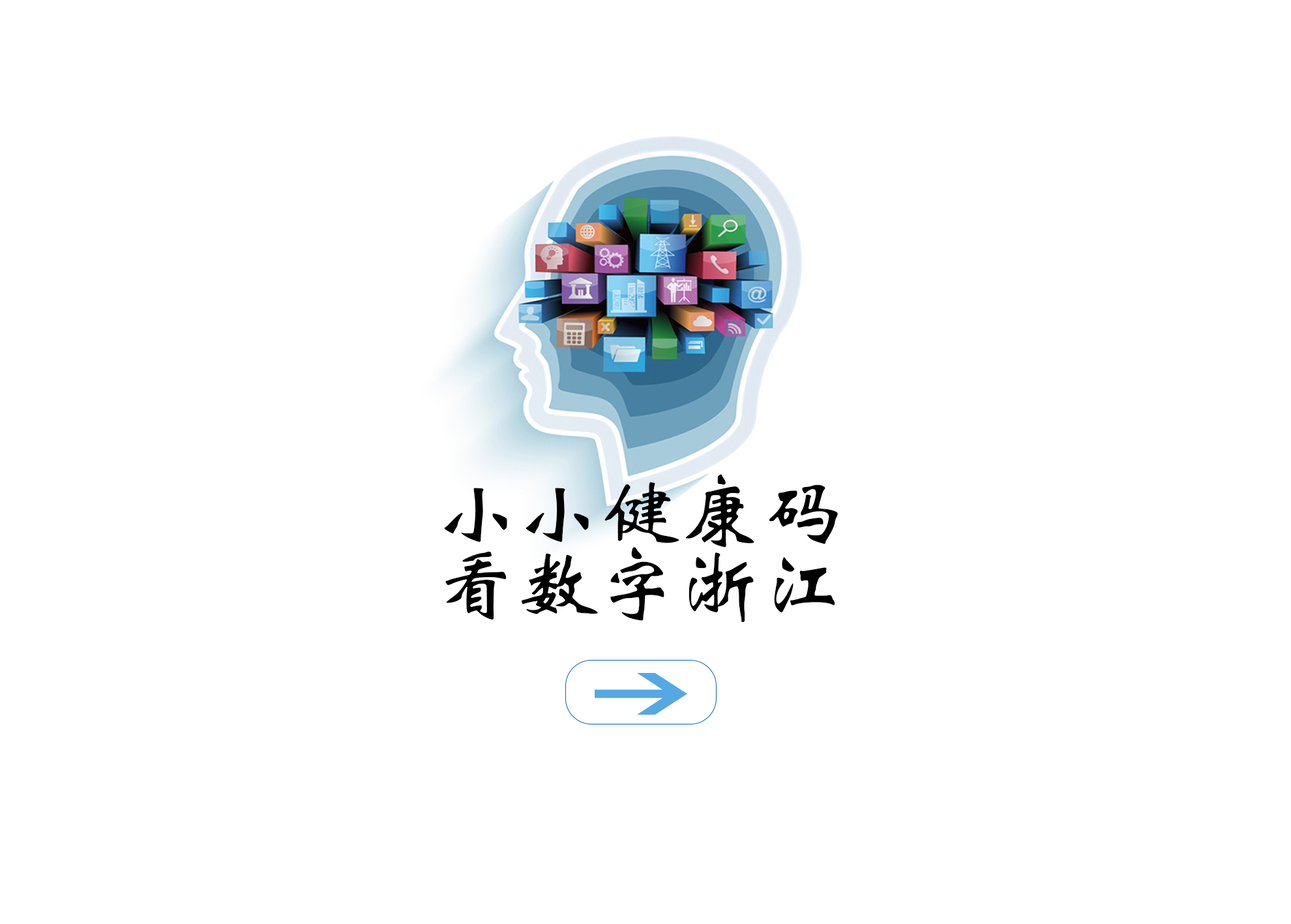
<style>
.page{position:relative;width:1291px;height:924px;background:#ffffff}
.page>*{position:absolute;margin:0}
.t1{font:81.5px/72.4px "STXinwei";color:#000000}
</style>
<div class="page">
<p class="t1" style="left:444px;top:474px;width:394px;height:148px">小小健康码<br>看数字浙江</p>
</div>
